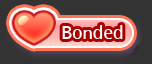
<style>
.page{position:relative;width:152px;height:64px;background:#333333}
.page>*{position:absolute;margin:0}
.t1{font:18px "JK-Gothic-M";color:#ffffff}
</style>
<div class="page">
<p class="t1" style="left:62px;top:25px;width:61px;height:14px">Bonded</p>
</div>
